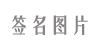
<style>
.page{position:relative;width:100px;height:50px;background:#ffffff}
.page>*{position:absolute;margin:0}
.t1{font:20px "FZYTK--GBK1-0";color:#878383;font-weight:bold}
</style>
<div class="page">
<p class="t1" style="left:11px;top:15px;width:77px;height:20px">签名图片</p>
</div>
